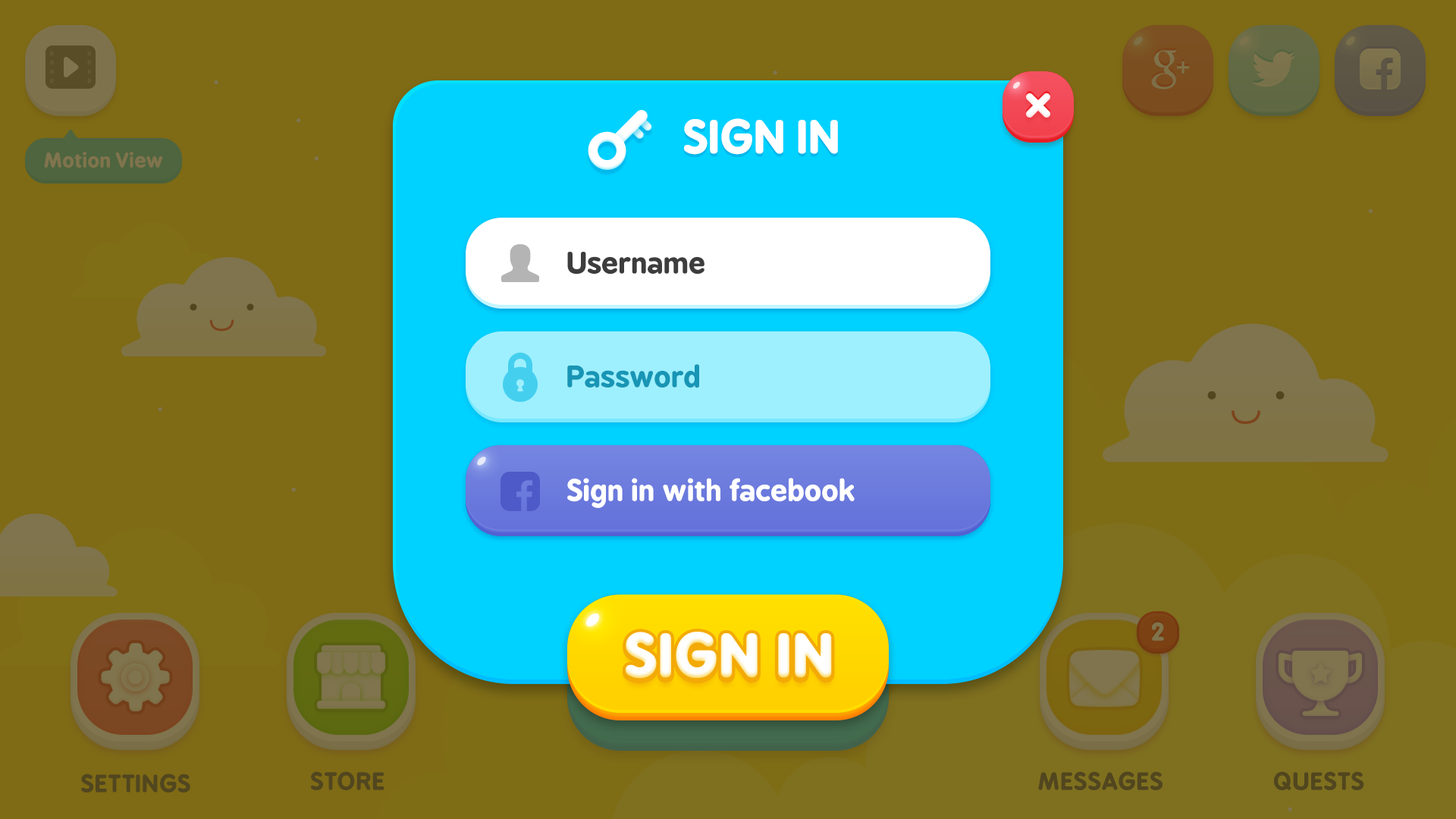
<style>
.page{position:relative;width:1456px;height:819px;background:#7f6a15}
.page>*{position:absolute;margin:0}
.t1{font:43.1px "BPreplay-Bold";color:#ffffff;text-transform:uppercase;scale:1.05 1}
.t2{font:28.1px "BPreplay-Bold";letter-spacing:-0.01em;color:#3d3d3d;scale:1.05 1}
.t3{font:28.1px "BPreplay-Bold";letter-spacing:-0.01em;color:#1895b5;scale:1.05 1}
.t4{font:28.1px "BPreplay-Bold";letter-spacing:-0.01em;color:#ffffff;scale:1.05 1}
.t5{font:54.8px "BPreplay-Bold";color:#ffffff;text-transform:uppercase;font-weight:bold;scale:1.05 1}
</style>
<div class="page">
<p class="t1" style="left:684px;top:118px;width:154px;height:37px">sign in</p>
<p class="t2" style="left:567px;top:252px;width:137px;height:23px">Username</p>
<p class="t3" style="left:567px;top:364px;width:132px;height:24px">Password</p>
<p class="t4" style="left:567px;top:478px;width:288px;height:30px">Sign in with facebook</p>
<p class="t5" style="left:626px;top:632px;width:206px;height:47px">SIGN IN</p>
</div>
